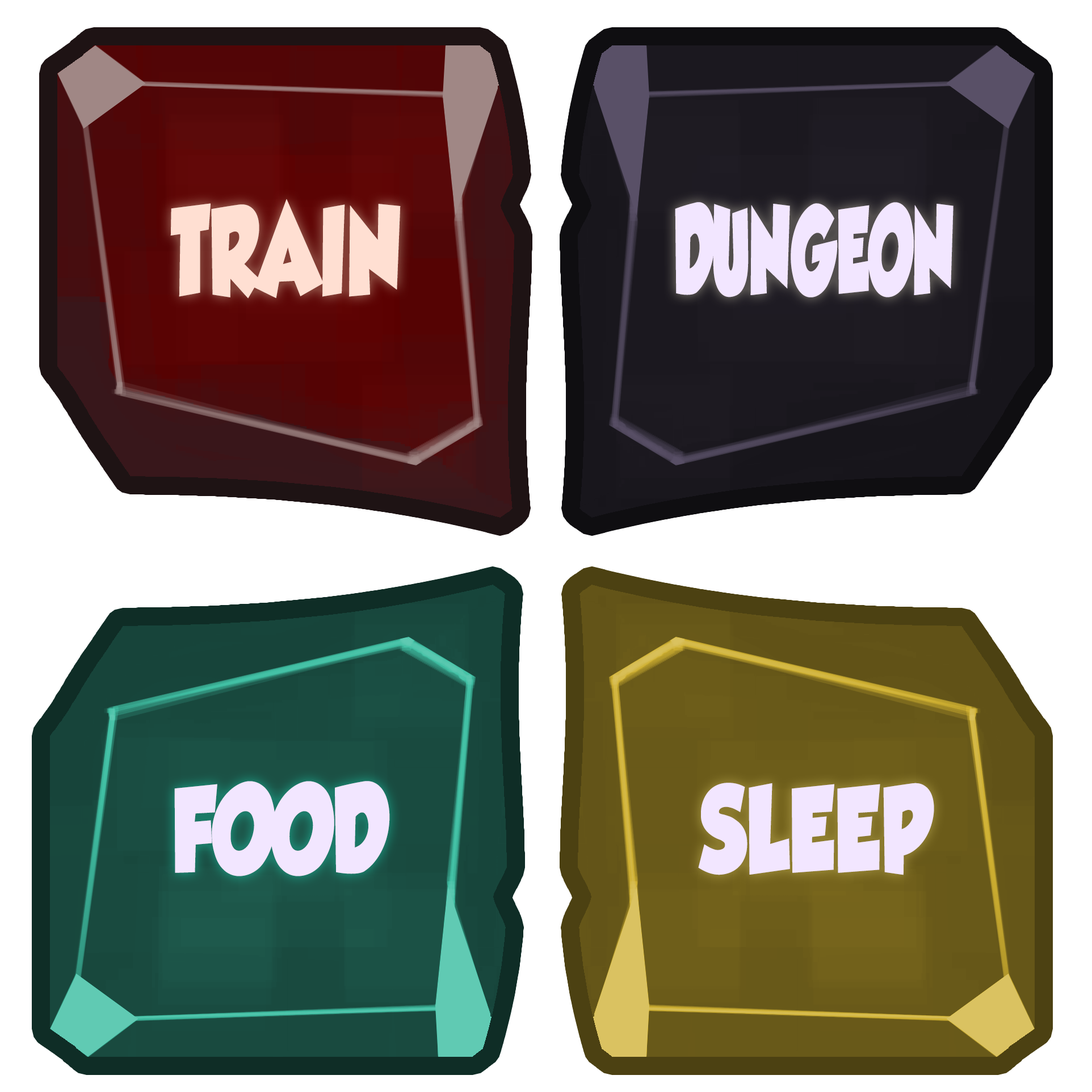
<style>
.page{position:relative;width:1092px;height:1092px;background:#ffffff}
.page>*{position:absolute;margin:0}
.t1{font:109.4px "GROBOLD";color:#ffdfd2;scale:0.66 1}
.t2{font:108px "GROBOLD";color:#f2e6ff;scale:0.52 1}
.t3{font:108px "GROBOLD";color:#f2e6ff;scale:0.71 1}
</style>
<div class="page">
<p class="t1" style="left:170px;top:199px;width:231px;height:100px">TRAIN</p>
<p class="t2" style="left:675px;top:202px;width:279px;height:95px">DUNGEON</p>
<p class="t3" style="left:174px;top:781px;width:216px;height:95px">FOOD</p>
<p class="t3" style="left:698px;top:783px;width:236px;height:92px">SLEEP</p>
</div>
